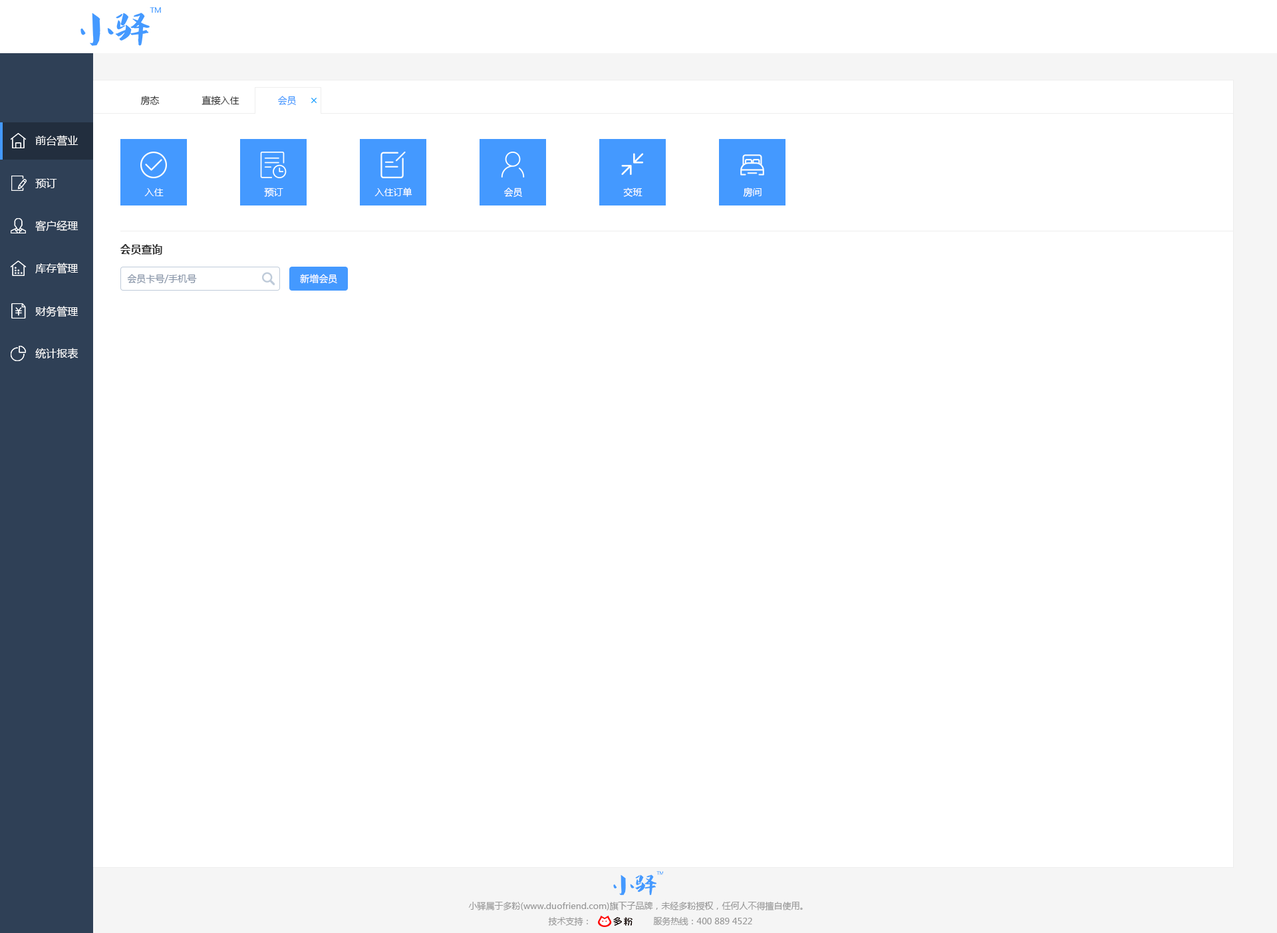
<style>
.page{position:relative;width:1277px;height:933px;background:#ffffff}
.page>*{position:absolute;margin:0}
.t1{font:9.3px "MicrosoftYaHei";color:#333333}
.t2{font:9.3px "MicrosoftYaHei";color:#4499ff}
.t3{font:10.6px "MicrosoftYaHei";color:#ffffff}
.t4{font:9.3px "MicrosoftYaHei";color:#ffffff}
.t5{font:10.6px "MicrosoftYaHei-Bold";color:#333333}
.t6{font:9.3px "MicrosoftYaHei";color:#8391a5}
.t7{font:8.6px "MicrosoftYaHei";color:#999999}
</style>
<div class="page">
<p class="t1" style="left:140px;top:96px;width:20px;height:9px">房态</p>
<p class="t1" style="left:202px;top:96px;width:38px;height:9px">直接入住</p>
<p class="t2" style="left:278px;top:96px;width:18px;height:10px">会员</p>
<p class="t3" style="left:35px;top:135px;width:44px;height:11px">前台营业</p>
<p class="t3" style="left:35px;top:178px;width:22px;height:10px">预订</p>
<p class="t4" style="left:144px;top:188px;width:20px;height:8px">入住</p>
<p class="t4" style="left:264px;top:188px;width:19px;height:9px">预订</p>
<p class="t4" style="left:375px;top:188px;width:38px;height:9px">入住订单</p>
<p class="t4" style="left:504px;top:188px;width:18px;height:10px">会员</p>
<p class="t4" style="left:623px;top:188px;width:20px;height:9px">交班</p>
<p class="t4" style="left:743px;top:188px;width:19px;height:9px">房间</p>
<p class="t3" style="left:35px;top:220px;width:44px;height:12px">客户经理</p>
<p class="t5" style="left:120px;top:244px;width:42px;height:11px">会员查询</p>
<p class="t3" style="left:35px;top:263px;width:44px;height:11px">库存管理</p>
<p class="t6" style="left:127px;top:274px;width:70px;height:10px">会员卡号/手机号</p>
<p class="t4" style="left:300px;top:274px;width:37px;height:10px">新增会员</p>
<p class="t3" style="left:35px;top:306px;width:44px;height:11px">财务管理</p>
<p class="t3" style="left:35px;top:348px;width:44px;height:11px">统计报表</p>
<p class="t7" style="left:468px;top:902px;width:335px;height:9px">小驿属于多粉(www.duofriend.com)旗下子品牌，未经多粉授权，任何人不得擅自使用。</p>
<p class="t7" style="left:548px;top:917px;width:40px;height:9px">技术支持：</p>
<p class="t7" style="left:653px;top:917px;width:99px;height:9px">服务热线：400 889 4522</p>
</div>
